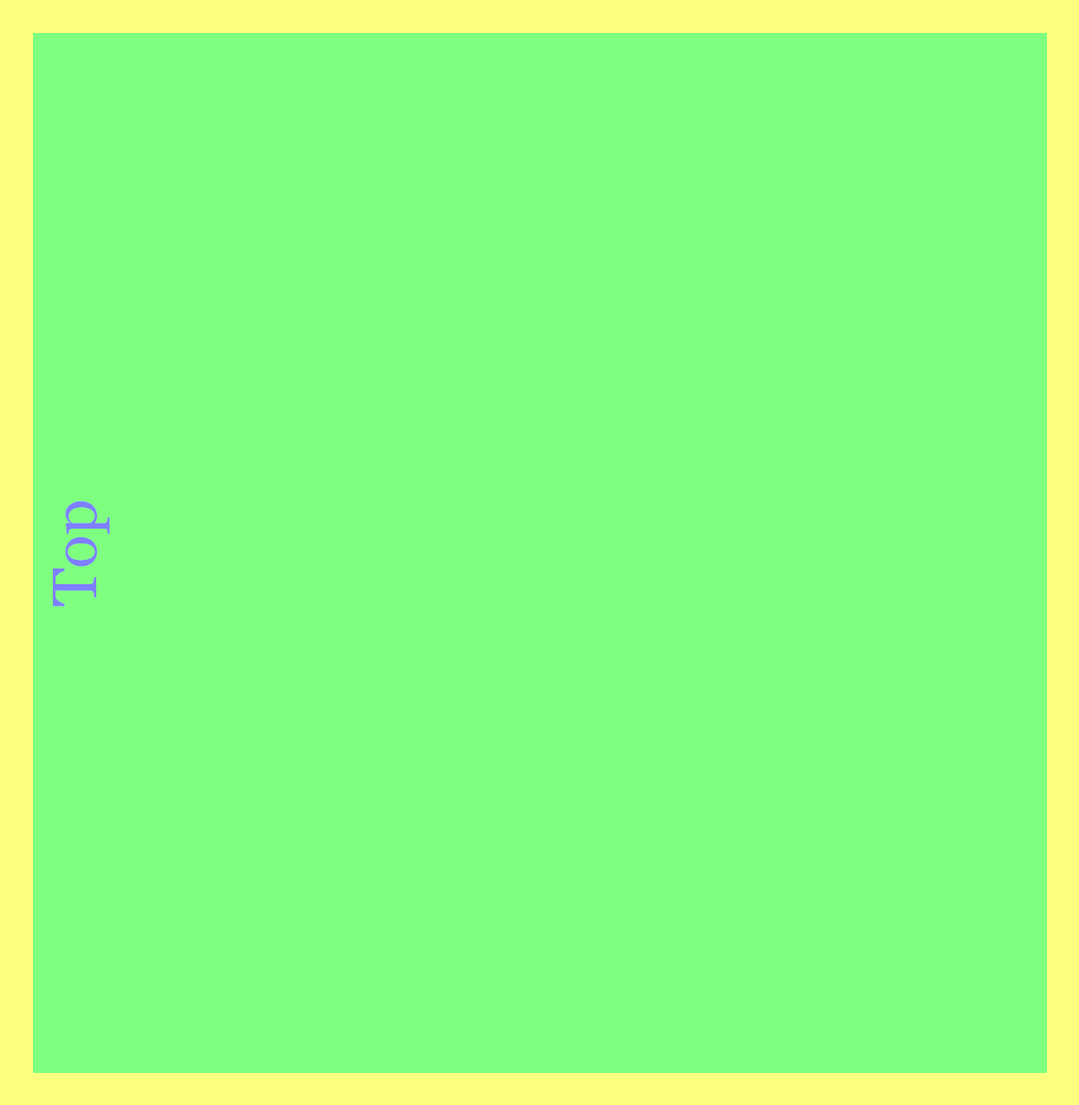
<style>
.page{position:relative;width:1079px;height:1105px;background:#7fff7f}
.page>*{position:absolute;margin:0}
.t1{font:62.4px "Georgia";color:#7f7fff}
</style>
<div class="page">
<p class="t1" style="left:53px;top:501px;width:57px;height:106px;rotate:-90deg">Top</p>
</div>
